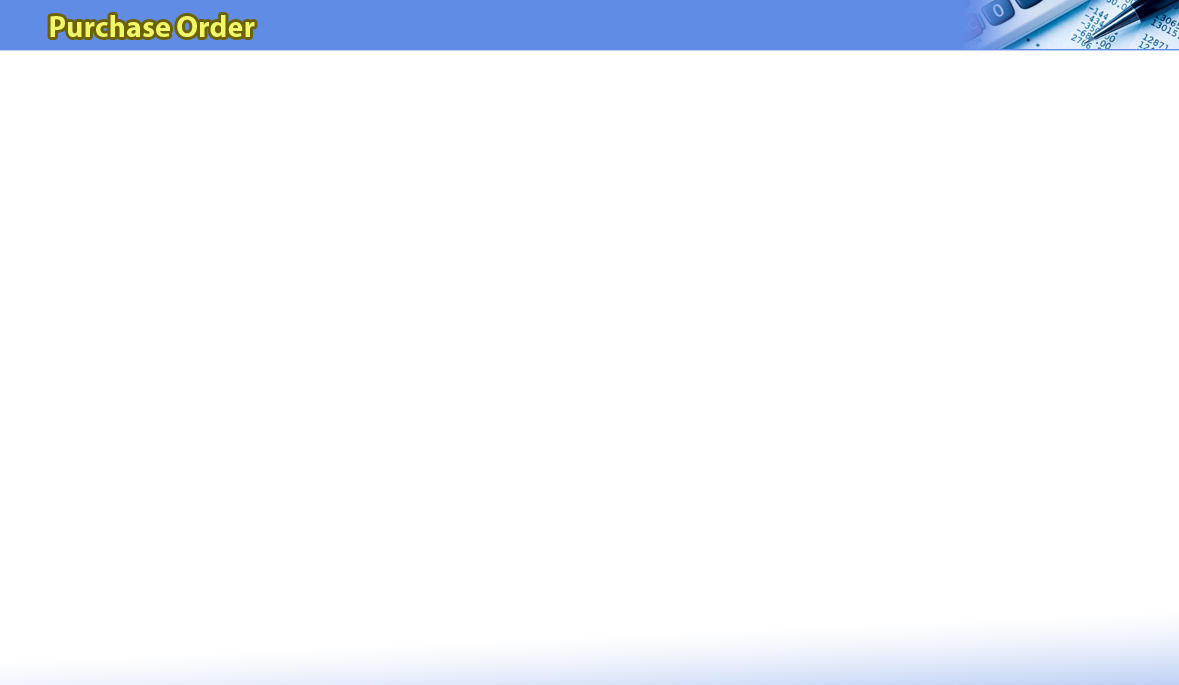
<style>
.page{position:relative;width:1179px;height:685px;background:#ffffff}
.page>*{position:absolute;margin:0}
.t1{font:30px "MyriadPro-Bold";color:#f0f869}
</style>
<div class="page">
<p class="t1" style="left:50px;top:15px;width:205px;height:22px">Purchase Order</p>
</div>
